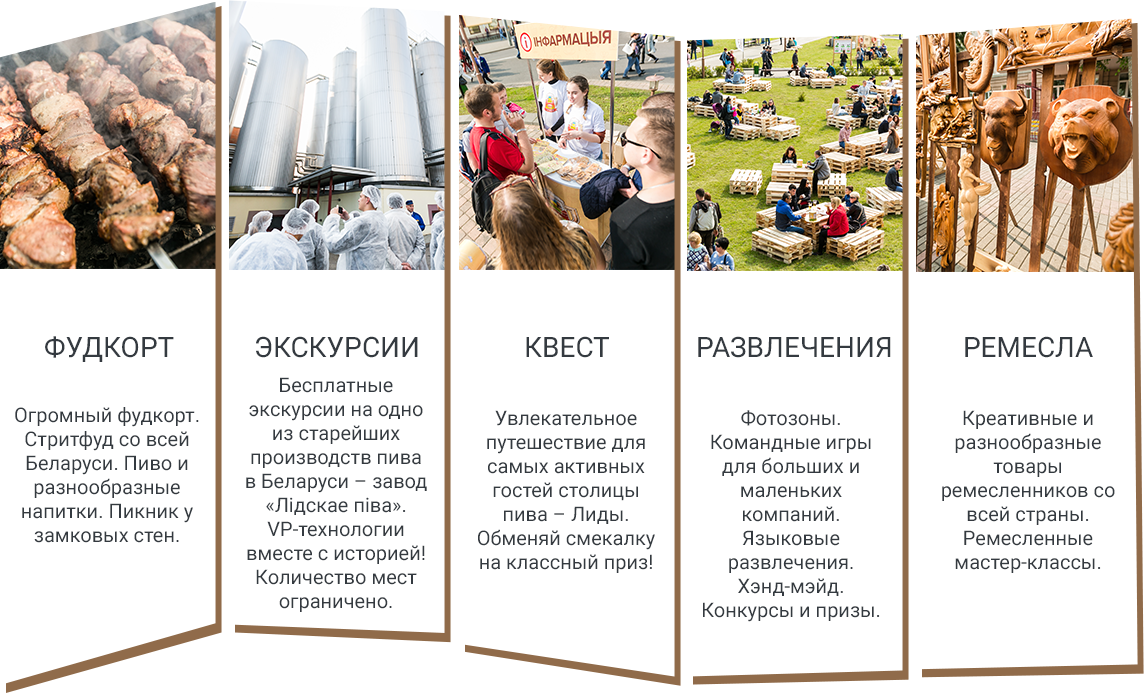
<style>
.page{position:relative;width:1144px;height:693px;background:#ffffff}
.page>*{position:absolute;margin:0}
.t1{font:28px "Roboto-Regular";color:#343a40;text-transform:uppercase}
.t2{font:20px "Roboto-Regular";color:#343a40}
</style>
<div class="page">
<p class="t1" style="left:45px;top:336px;width:129px;height:26px">фудкорт</p>
<p class="t1" style="left:256px;top:336px;width:162px;height:22px">экскурсии</p>
<p class="t1" style="left:526px;top:336px;width:83px;height:22px">КВЕСТ</p>
<p class="t1" style="left:698px;top:336px;width:193px;height:22px">развлечения</p>
<p class="t1" style="left:965px;top:336px;width:128px;height:22px">ремесла</p>
<p class="t2" style="left:246px;top:377px;width:181px;height:235px;text-align:center">Бесплатные экскурсии на одно из старейших производств пива в Беларуси – завод «Лідскае піва». VP-технологии вместе с историей! Количество мест ограничено.</p>
<p class="t2" style="left:15px;top:407px;width:184px;height:136px;text-align:center">Огромный фудкорт. Стритфуд со всей Беларуси. Пиво и разнообразные напитки. Пикник у замковых стен.</p>
<p class="t2" style="left:478px;top:410px;width:177px;height:163px;text-align:center">Увлекательное путешествие для самых активных гостей столицы пива – Лиды. Обменяй смекалку на классный приз!</p>
<p class="t2" style="left:703px;top:410px;width:177px;height:212px;text-align:center">Фотозоны. Командные игры для больших и маленьких компаний. Языковые развлечения. Хэнд-мэйд. Конкурсы и призы.</p>
<p class="t2" style="left:942px;top:410px;width:173px;height:163px;text-align:center">Креативные и разнообразные товары ремесленников со всей страны. Ремесленные мастер-классы.</p>
</div>
